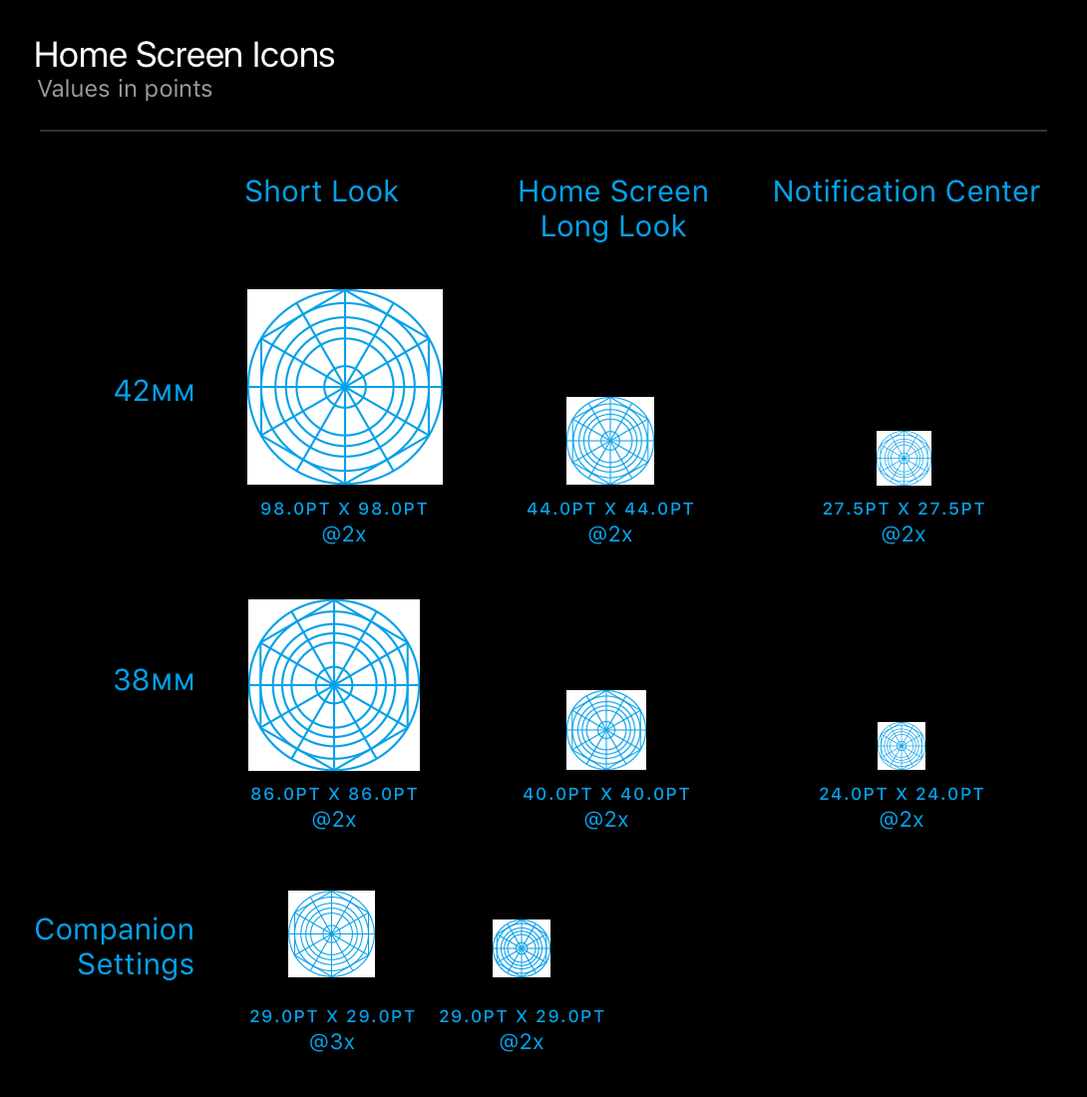
<style>
.page{position:relative;width:1087px;height:1097px;background:#000000}
.page>*{position:absolute;margin:0}
.t1{font:35.9px "SFUIDisplay-Regular";letter-spacing:-0.005em;color:#ffffff}
.t2{font:23.9px "SFUIText-Regular";letter-spacing:-0.005em;color:#999999}
.t3{font:29.9px "SFUIText-Regular";letter-spacing:0.004em;color:#05a0e8}
.t4{font:29.9px/34.9px "SFUIText-Regular";letter-spacing:0.004em;color:#05a0e8}
.t5{font:29.9px "SFUIText-Regular";letter-spacing:0.004em;color:#05a0e8;font-variant:small-caps}
.t6{font:21.9px/26.9px "SFUIText-Regular";letter-spacing:0.024em;color:#05a0e8;font-variant:small-caps}
.t7{font:21.9px/26.9px "SFUIText-Regular";letter-spacing:0.024em;color:#05a0e8}
</style>
<div class="page">
<p class="t1" style="left:36px;top:41px;width:298px;height:27px">Home Screen Icons</p>
<p class="t2" style="left:37px;top:79px;width:175px;height:23px">Values in points</p>
<p class="t3" style="left:245px;top:179px;width:154px;height:23px">Short Look</p>
<p class="t4" style="left:520px;top:180px;width:187px;height:62px;text-align:center">Home Screen<br>Long Look</p>
<p class="t3" style="left:775px;top:179px;width:265px;height:23px">Notification Center</p>
<p class="t3" style="left:115px;top:379px;width:78px;height:22px">42<span class="t5">mm</span></p>
<p class="t6" style="left:261px;top:502px;width:166px;height:43px;text-align:center">98.0pt x 98.0pt<br><span class="t7">@2x</span></p>
<p class="t6" style="left:527px;top:502px;width:166px;height:43px;text-align:center">44.0pt x 44.0pt<br><span class="t7">@2x</span></p>
<p class="t6" style="left:823px;top:502px;width:161px;height:43px;text-align:center">27.5pt x 27.5pt<br><span class="t7">@2x</span></p>
<p class="t3" style="left:115px;top:668px;width:78px;height:23px">38<span class="t5">mm</span></p>
<p class="t6" style="left:251px;top:787px;width:166px;height:43px;text-align:center">86.0pt x 86.0pt<br><span class="t7">@2x</span></p>
<p class="t6" style="left:523px;top:787px;width:166px;height:43px;text-align:center">40.0pt x 40.0pt<br><span class="t7">@2x</span></p>
<p class="t6" style="left:820px;top:787px;width:163px;height:43px;text-align:center">24.0pt x 24.0pt<br><span class="t7">@2x</span></p>
<p class="t4" style="left:35px;top:916px;width:158px;height:64px;text-align:right">Companion<br>Settings</p>
<p class="t6" style="left:250px;top:1009px;width:165px;height:43px;text-align:center">29.0pt x 29.0pt<br><span class="t7">@3x</span></p>
<p class="t6" style="left:440px;top:1009px;width:164px;height:43px;text-align:center">29.0pt x 29.0pt<br><span class="t7">@2x</span></p>
</div>
